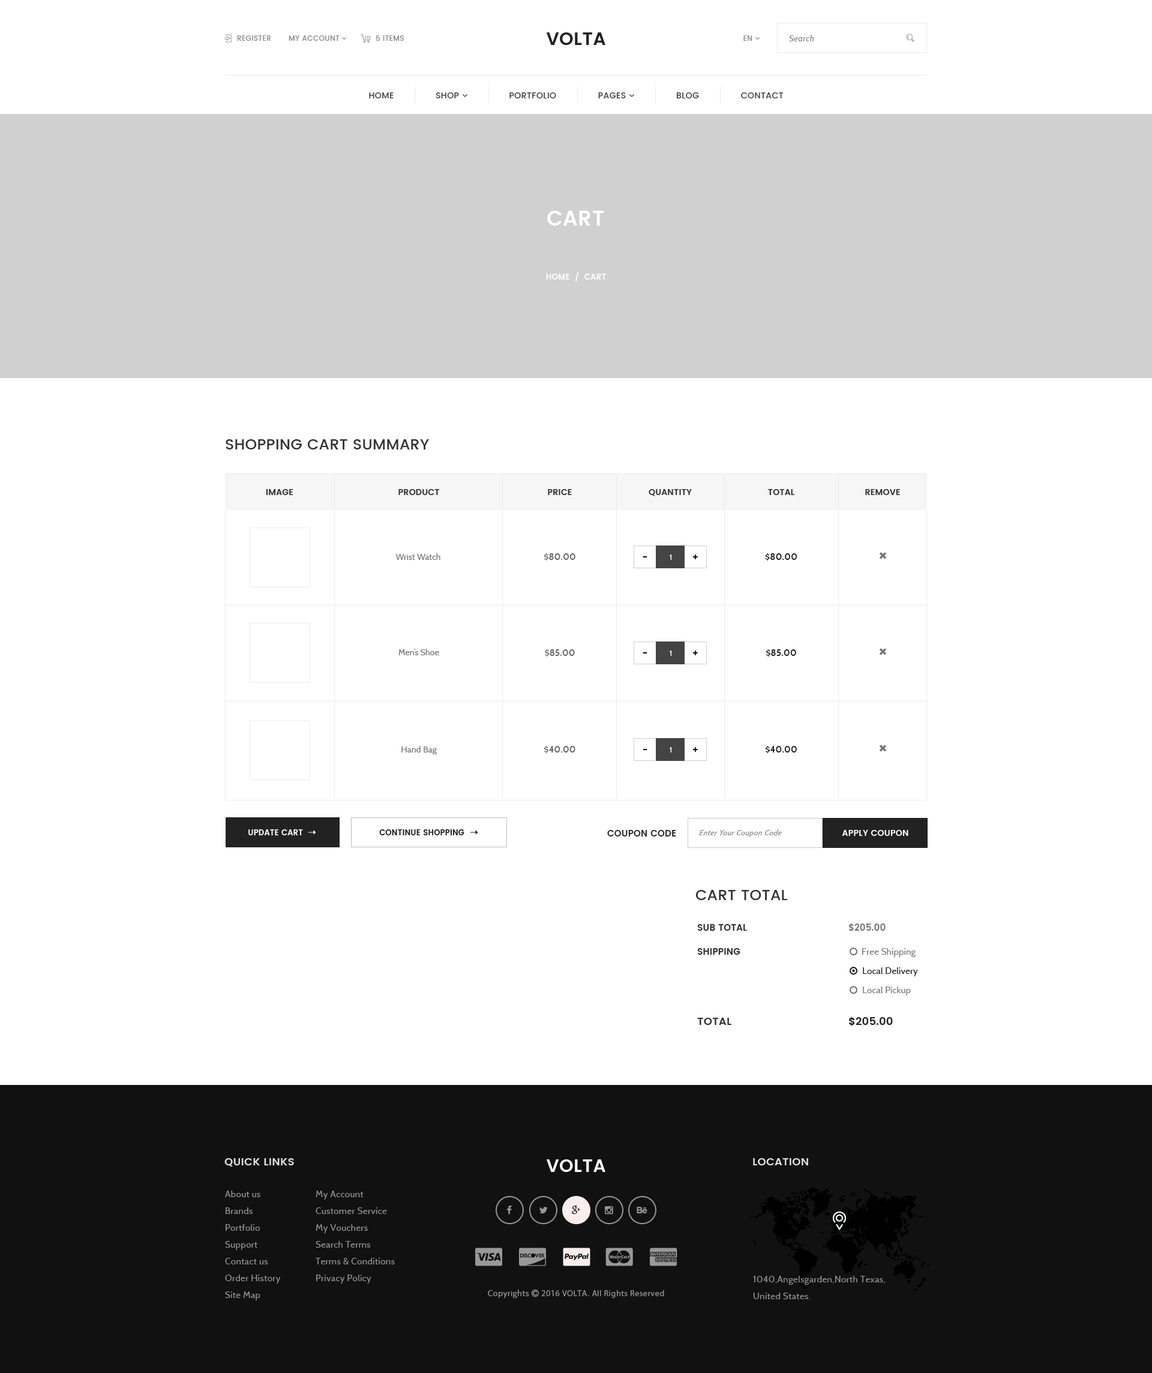
<style>
.page{position:relative;width:1152px;height:1373px;background:#ffffff}
.page>*{position:absolute;margin:0}
.t1{font:7.2px "Poppins-Medium";letter-spacing:0.03em;color:#888888}
.t2{font:18px "Poppins-SemiBold";letter-spacing:0.015em;color:#222222}
.t3{font:8.4px "Cabin-Italic";letter-spacing:0.04em;color:#888888}
.t4{font:21px "Poppins-SemiBold";letter-spacing:0.015em;color:#ffffff}
.t5{font:7.8px "Poppins-SemiBold";letter-spacing:0.03em;color:#ffffff}
.t6{font:15px "Poppins-Medium";letter-spacing:0.015em;color:#333333;text-transform:uppercase}
.t7{font:8.4px "Poppins-SemiBold";letter-spacing:0.015em;color:#333333;text-transform:uppercase}
.t8{font:8.4px "Cabin-Regular";letter-spacing:0.015em;color:#777777}
.t9{font:9px "Cabin-SemiBold";letter-spacing:0.015em;color:#666666}
.t10{font:12px "Cabin-Regular";letter-spacing:0.015em;color:#000000}
.t11{font:7.8px "Cabin-Regular";letter-spacing:0.015em;color:#ffffff}
.t12{font:9px "Cabin-SemiBold";letter-spacing:0.02em;color:#222222}
.t13{font:7.8px "Poppins-SemiBold";letter-spacing:0.015em;color:#ffffff}
.t14{font:7.8px "Poppins-SemiBold";letter-spacing:0.015em;color:#222222}
.t15{font:9px "Poppins-SemiBold";letter-spacing:0.015em;color:#333333;text-transform:uppercase}
.t16{font:7.8px "Cabin-Italic";letter-spacing:0.04em;color:#8d8d8d;font-style:italic}
.t17{font:8.4px "Poppins-SemiBold";letter-spacing:0.015em;color:#ffffff;text-transform:uppercase}
.t18{font:9px "Poppins-SemiBold";letter-spacing:0.015em;color:#777777;text-transform:uppercase}
.t19{font:10.8px "Poppins-SemiBold";letter-spacing:0.015em;color:#222222;text-transform:uppercase}
.t20{font:10.8px "Poppins-SemiBold";letter-spacing:0.015em;color:#333333;text-transform:uppercase}
.t21{font:10.8px "Poppins-SemiBold";letter-spacing:0.015em;color:#e1e1e1}
.t22{font:18px "Poppins-SemiBold";letter-spacing:0.015em;color:#ffffff}
.t23{font:9px/16.8px "Cabin-Regular";letter-spacing:0.03em;color:#989898}
</style>
<div class="page">
<p class="t1" style="left:237px;top:35px;width:34px;height:6px">REGISTER</p>
<p class="t1" style="left:376px;top:35px;width:28px;height:6px">5 ITEMS</p>
<p class="t2" style="left:546px;top:32px;width:59px;height:13px">VOLTA</p>
<p class="t3" style="left:789px;top:35px;width:25px;height:6px">Search</p>
<p class="t4" style="left:547px;top:211px;width:57px;height:15px">CART</p>
<p class="t5" style="left:546px;top:272px;width:60px;height:9px">HOME  /  CART</p>
<p class="t6" style="left:226px;top:439px;width:203px;height:10px">Shopping Cart Summary</p>
<p class="t7" style="left:266px;top:489px;width:27px;height:6px">Image</p>
<p class="t7" style="left:398px;top:489px;width:42px;height:6px">Product</p>
<p class="t7" style="left:548px;top:489px;width:24px;height:6px">Price</p>
<p class="t7" style="left:649px;top:489px;width:43px;height:7px">Quantity</p>
<p class="t7" style="left:768px;top:489px;width:26px;height:6px">Total</p>
<p class="t7" style="left:865px;top:489px;width:35px;height:6px">Remove</p>
<p class="t8" style="left:395px;top:553px;width:45px;height:7px">Wrist Watch</p>
<p class="t9" style="left:544px;top:553px;width:31px;height:7px">$80.00</p>
<p class="t10" style="left:643px;top:556px;width:4px;height:1px">-</p>
<p class="t11" style="left:670px;top:554px;width:2px;height:6px">1</p>
<p class="t10" style="left:693px;top:554px;width:5px;height:5px">+</p>
<p class="t12" style="left:765px;top:553px;width:32px;height:7px">$80.00</p>
<p class="t8" style="left:398px;top:649px;width:41px;height:6px">Men’s Shoe</p>
<p class="t9" style="left:545px;top:649px;width:30px;height:7px">$85.00</p>
<p class="t10" style="left:643px;top:652px;width:4px;height:1px">-</p>
<p class="t11" style="left:670px;top:650px;width:2px;height:6px">1</p>
<p class="t10" style="left:693px;top:650px;width:5px;height:5px">+</p>
<p class="t12" style="left:766px;top:649px;width:30px;height:7px">$85.00</p>
<p class="t8" style="left:401px;top:746px;width:36px;height:8px">Hand Bag</p>
<p class="t9" style="left:544px;top:746px;width:31px;height:7px">$40.00</p>
<p class="t10" style="left:643px;top:749px;width:4px;height:1px">-</p>
<p class="t11" style="left:670px;top:747px;width:2px;height:5px">1</p>
<p class="t10" style="left:693px;top:747px;width:5px;height:5px">+</p>
<p class="t12" style="left:766px;top:746px;width:31px;height:7px">$40.00</p>
<p class="t13" style="left:248px;top:829px;width:55px;height:6px">UPDATE CART</p>
<p class="t14" style="left:379px;top:829px;width:85px;height:6px">CONTINUE SHOPPING</p>
<p class="t15" style="left:607px;top:830px;width:69px;height:6px">COUPON CODE</p>
<p class="t16" style="left:699px;top:829px;width:83px;height:8px">Enter Your Coupon Code</p>
<p class="t17" style="left:842px;top:830px;width:66px;height:6px">Apply Coupon</p>
<p class="t6" style="left:695px;top:890px;width:93px;height:10px">Cart Total</p>
<p class="t15" style="left:697px;top:923px;width:189px;height:8px">Sub Total     <span class="t18">$205.00</span></p>
<p class="t15" style="left:697px;top:948px;width:43px;height:7px">Shipping</p>
<p class="t19" style="left:697px;top:1016px;width:196px;height:10px"><span class="t20">Total      </span>$205.00</p>
<p class="t21" style="left:224px;top:1158px;width:70px;height:8px">QUICK LINKS</p>
<p class="t21" style="left:753px;top:1158px;width:55px;height:7px">LOCATION</p>
<p class="t22" style="left:546px;top:1159px;width:59px;height:13px">VOLTA</p>
<p class="t23" style="left:225px;top:1190px;width:56px;height:110px">About us<br>Brands<br>Portfolio<br>Support<br>Contact us<br>Order History<br>Site Map</p>
<p class="t23" style="left:316px;top:1190px;width:79px;height:93px">My Account<br>Customer Service<br>My Vouchers<br>Search Terms<br>Terms &amp; Conditions<br>Privacy Policy</p>
<p class="t23" style="left:753px;top:1276px;width:132px;height:23px">1040,Angelsgarden,North Texas,<br>United States.</p>
</div>
